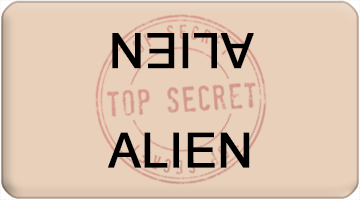
<style>
.page{position:relative;width:360px;height:200px;background:#e8d0bb}
.page>*{position:absolute;margin:0}
.t1{font:48px "ArialMT";color:#000000;font-weight:bold}
</style>
<div class="page">
<p class="t1" style="left:112px;top:33px;width:142px;height:36px;rotate:180deg">ALIEN</p>
<p class="t1" style="left:108px;top:132px;width:142px;height:36px">ALIEN</p>
</div>
